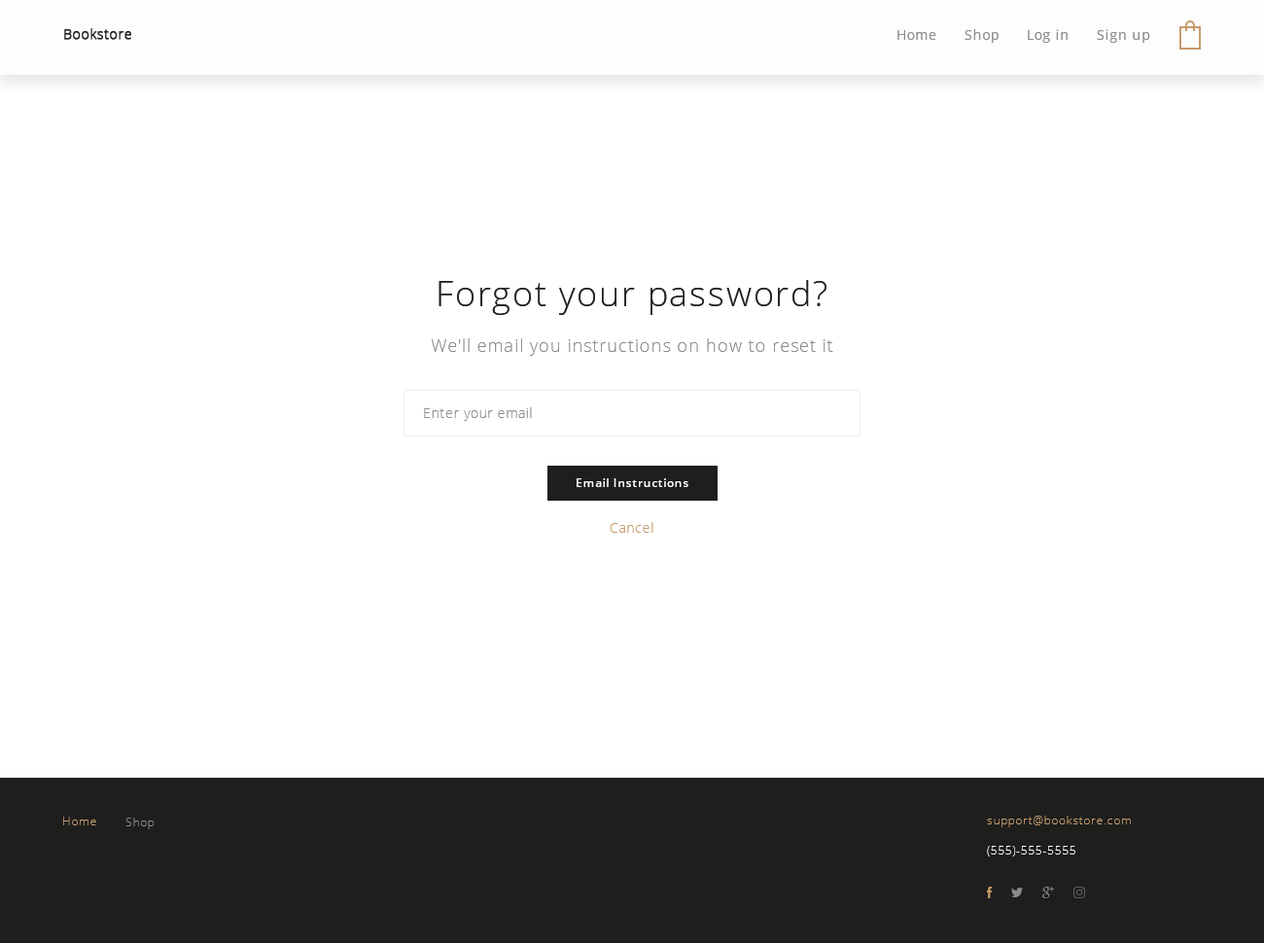
<style>
.page{position:relative;width:1264px;height:943px;background:#ffffff}
.page>*{position:absolute;margin:0}
.t1{font:35px "OpenSans-Light";letter-spacing:0.05em;color:#212121}
.t2{font:17.5px "OpenSans-Light";letter-spacing:0.05em;color:#8c8c8c}
.t3{font:13.6px "OpenSans-Light";letter-spacing:0.05em;color:#8c8c8c}
.t4{font:11.7px "OpenSans-Semibold";letter-spacing:0.05em;color:#fffefe}
.t5{font:13.6px "OpenSans-Light";letter-spacing:0.05em;color:#c69c6d}
</style>
<div class="page">
<p class="t1" style="left:439px;top:280px;width:388px;height:35px">Forgot your password?</p>
<p class="t2" style="left:432px;top:338px;width:401px;height:18px">We'll email you instructions on how to reset it</p>
<p class="t3" style="left:424px;top:407px;width:108px;height:14px">Enter your email</p>
<p class="t4" style="left:577px;top:478px;width:111px;height:9px">Email Instructions</p>
<p class="t5" style="left:610px;top:522px;width:43px;height:11px">Cancel</p>
</div>
